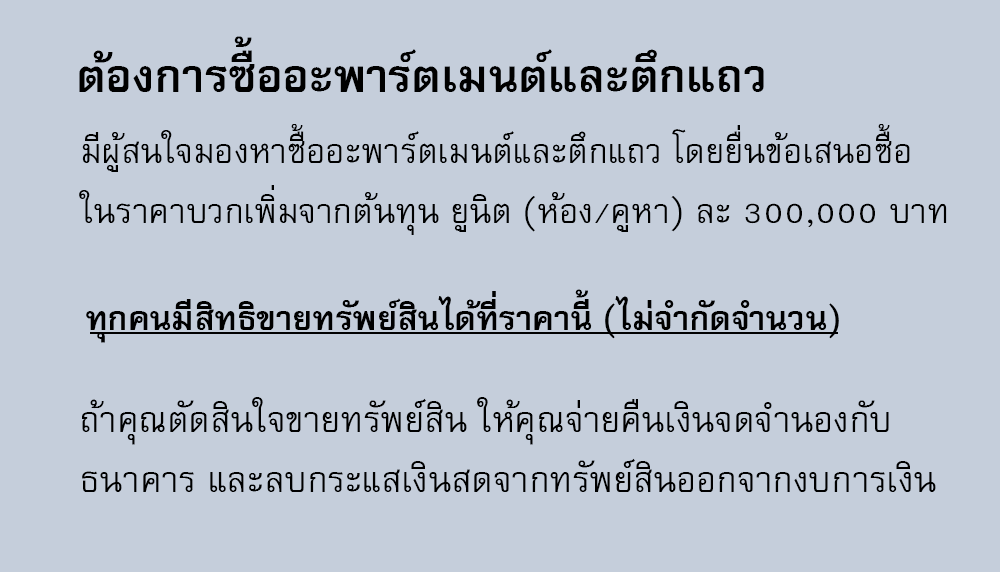
<style>
.page{position:relative;width:1000px;height:572px;background:#c5cedb}
.page>*{position:absolute;margin:0}
.t1{font:64px "FreesiaUPCBold";color:#000000}
.t2{font:48px/60px "FreesiaUPC";color:#000000}
.t3{font:47px "FreesiaUPCBold";color:#000000}
.t4{font:50px/60px "FreesiaUPC";color:#000000}
</style>
<div class="page">
<p class="t1" style="left:79px;top:36px;width:685px;height:56px">ต้องการซื้ออะพาร์ตเมนต์และตึกแถว</p>
<p class="t2" style="left:79px;top:124px;width:868px;height:111px">มีผู้สนใจมองหาซื้ออะพาร์ตเมนต์และตึกแถว โดยยื่นข้อเสนอซื้อ<br>ในราคาบวกเพิ่มจากต้นทุน ยูนิต (ห้อง/คูหา) ละ 300,000 บาท</p>
<p class="t3" style="left:86px;top:289px;width:753px;height:54px">ทุกคนมีสิทธิขายทรัพย์สินได้ที่ราคานี้ (ไม่จำกัดจำนวน)</p>
<p class="t4" style="left:82px;top:397px;width:854px;height:95px">ถ้าคุณตัดสินใจขายทรัพย์สิน ให้คุณจ่ายคืนเงินจดจำนองกับ<br>ธนาคาร และลบกระแสเงินสดจากทรัพย์สินออกจากงบการเงิน</p>
</div>
